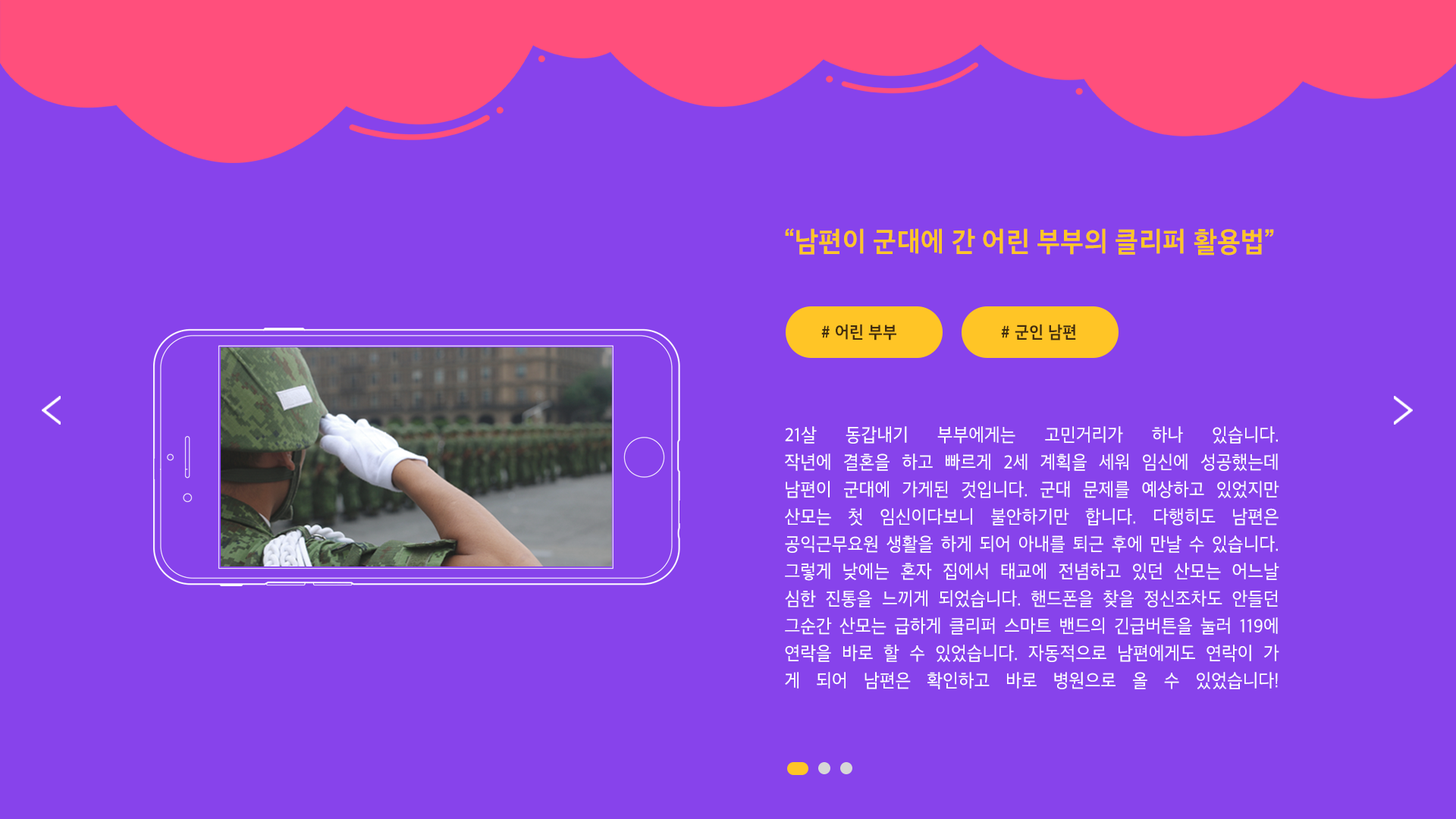
<style>
.page{position:relative;width:1456px;height:819px;background:#8743eb}
.page>*{position:absolute;margin:0}
.t1{font:27.3px "SDGothicNeob-fBd";letter-spacing:0.01em;color:#ffc526;scale:0.93 1}
.t2{font:16.7px "SDGothicNeob-fBd";letter-spacing:0.01em;color:#422d0f;scale:0.93 1}
.t3{font:18.2px/27.3px "SDGothicNeob-cRg";letter-spacing:0.01em;color:#ffffff;scale:0.93 1}
</style>
<div class="page">
<p class="t1" style="left:785px;top:228px;width:489px;height:28px">“남편이 군대에 간 어린 부부의 클리퍼 활용법”</p>
<p class="t2" style="left:821px;top:324px;width:75px;height:16px"># 어린 부부</p>
<p class="t2" style="left:1001px;top:324px;width:75px;height:16px"># 군인 남편</p>
<p class="t3" style="left:785px;top:426px;width:494px;height:263px;text-align:justify">21살 동갑내기 부부에게는 고민거리가 하나 있습니다. <br>작년에 결혼을 하고 빠르게 2세 계획을 세워 임신에 성공했는데 <br>남편이 군대에 가게된 것입니다. 군대 문제를 예상하고 있었지만 <br>산모는 첫 임신이다보니 불안하기만 합니다. 다행히도 남편은 <br>공익근무요원 생활을 하게 되어 아내를 퇴근 후에 만날 수 있습니다. <br>그렇게 낮에는 혼자 집에서 태교에 전념하고 있던 산모는 어느날 <br>심한 진통을 느끼게 되었습니다. 핸드폰을 찾을 정신조차도 안들던 <br>그순간 산모는 급하게 클리퍼 스마트 밴드의 긴급버튼을 눌러 119에 <br>연락을 바로 할 수 있었습니다. 자동적으로 남편에게도 연락이 가<br>게 되어 남편은 확인하고 바로 병원으로 올 수 있었습니다!</p>
</div>
